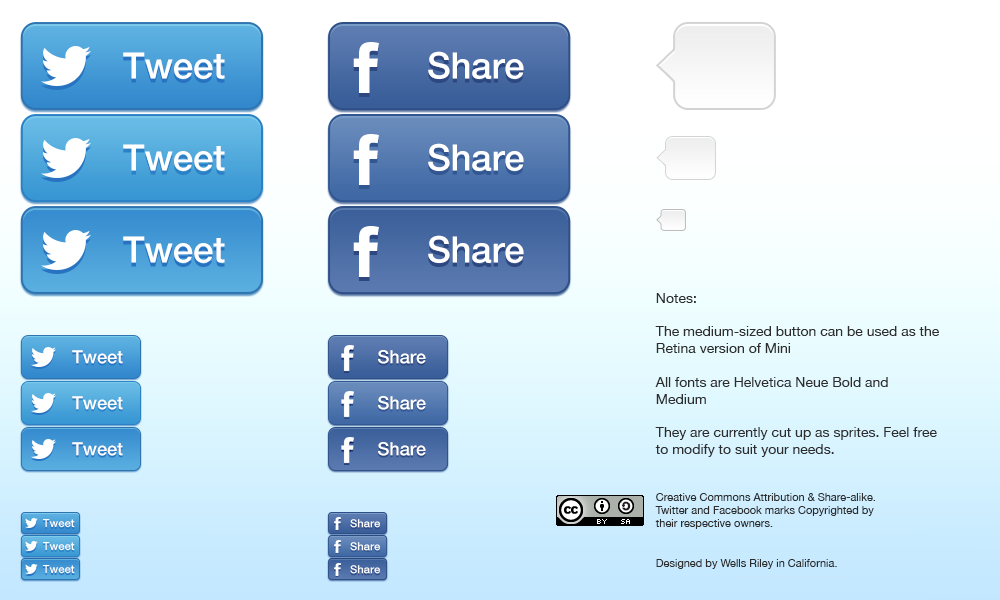
<style>
.page{position:relative;width:1000px;height:600px}
.page>*{position:absolute;margin:0}
.t1{font:36.6px "HelveticaNeueLTStd-Md";letter-spacing:-0.005em;color:#ffffff}
.t2{font:36.6px "HelveticaNeue-Medium";letter-spacing:-0.005em;color:#ffffff}
.t3{font:14px "HelveticaNeue";color:#2d2d2d}
.t4{font:11px "HelveticaNeue";color:#2d2d2d}
.t5{font:18.3px "HelveticaNeueLTStd-Md";letter-spacing:-0.005em;color:#ffffff}
.t6{font:18.3px "HelveticaNeue-Medium";letter-spacing:-0.005em;color:#ffffff}
.t7{font:11.2px "HelveticaNeue-Medium";letter-spacing:-0.005em;color:#ffffff}
</style>
<div class="page">
<p class="t1" style="left:123px;top:52px;width:102px;height:27px">Tweet</p>
<p class="t2" style="left:428px;top:51px;width:96px;height:28px">Share</p>
<p class="t1" style="left:123px;top:144px;width:102px;height:27px">Tweet</p>
<p class="t2" style="left:428px;top:143px;width:96px;height:28px">Share</p>
<p class="t1" style="left:123px;top:236px;width:102px;height:27px">Tweet</p>
<p class="t2" style="left:428px;top:235px;width:96px;height:28px">Share</p>
<p class="t3" style="left:655px;top:293px;width:284px;height:276px">Notes:<br><br>The medium-sized button can be used as the Retina version of Mini<br><br>All fonts are Helvetica Neue Bold and Medium<br><br>They are currently cut up as sprites. Feel free to modify to suit your needs.<br><br><br><span class="t4">Creative Commons Attribution &amp; Share-alike.<br>Twitter and Facebook marks Copyrighted by <br>their respective owners.<br><br><br>Designed by Wells Riley in California.</span></p>
<p class="t5" style="left:72px;top:350px;width:51px;height:14px">Tweet</p>
<p class="t6" style="left:378px;top:350px;width:48px;height:14px">Share</p>
<p class="t5" style="left:72px;top:396px;width:51px;height:14px">Tweet</p>
<p class="t6" style="left:378px;top:396px;width:48px;height:14px">Share</p>
<p class="t5" style="left:72px;top:442px;width:51px;height:14px">Tweet</p>
<p class="t6" style="left:378px;top:442px;width:48px;height:14px">Share</p>
<p class="t7" style="left:43px;top:519px;width:32px;height:8px">Tweet</p>
<p class="t7" style="left:350px;top:519px;width:30px;height:9px">Share</p>
<p class="t7" style="left:43px;top:542px;width:32px;height:8px">Tweet</p>
<p class="t7" style="left:350px;top:542px;width:30px;height:9px">Share</p>
<p class="t7" style="left:43px;top:565px;width:32px;height:8px">Tweet</p>
<p class="t7" style="left:350px;top:565px;width:30px;height:9px">Share</p>
</div>
